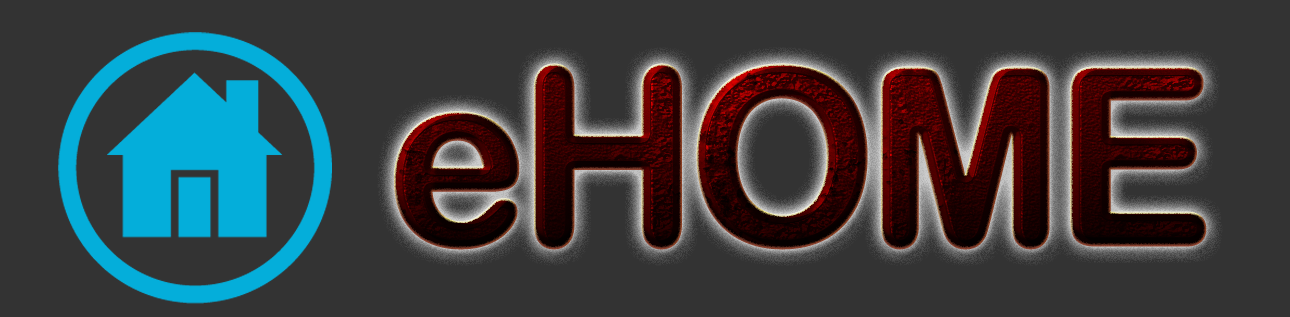
<style>
.page{position:relative;width:1290px;height:317px;background:#333333}
.page>*{position:absolute;margin:0}
.t1{font:241.7px "ArialRoundedMTBold";letter-spacing:-0.06em;font-weight:bold}
</style>
<div class="page">
<p class="t1" style="left:394px;top:63px;width:813px;height:187px">eHOME</p>
</div>
